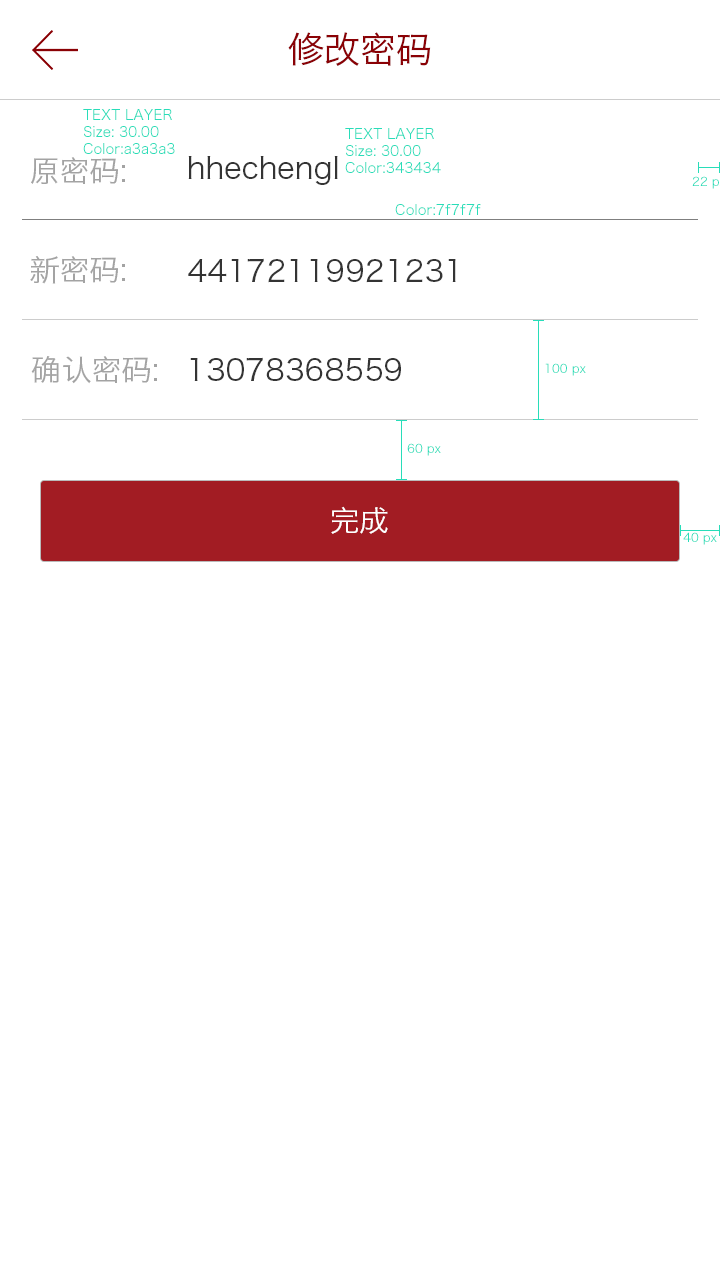
<style>
.page{position:relative;width:720px;height:1280px;background:#ffffff}
.page>*{position:absolute;margin:0}
.t1{font:36px "HiraginoSansGB-W3";color:#8a0105}
.t2{font:14px "HiraginoSansGB-W3";color:#28ddb9}
.t3{font:30px "HiraginoSansGB-W3";color:#a3a3a3}
.t4{font:30px "HiraginoSansGB-W3";color:#343434}
.t5{font:12px "HiraginoSansGB-W3";color:#28ddb9}
.t6{font:30px "HiraginoSansGB-W3";color:#ffffff}
</style>
<div class="page">
<p class="t1" style="left:288px;top:32px;width:143px;height:34px">修改密码</p>
<p class="t2" style="left:83px;top:109px;width:92px;height:45px">TEXT LAYER<br>Size: 30.00<br>Color:a3a3a3</p>
<p class="t2" style="left:345px;top:128px;width:96px;height:45px">TEXT LAYER<br>Size: 30.00<br>Color:343434</p>
<p class="t3" style="left:31px;top:157px;width:94px;height:27px">原密码:</p>
<p class="t4" style="left:188px;top:156px;width:150px;height:29px">hhechengl</p>
<p class="t2" style="left:395px;top:204px;width:86px;height:11px">Color:7f7f7f</p>
<p class="t3" style="left:30px;top:256px;width:95px;height:28px">新密码:</p>
<p class="t4" style="left:188px;top:258px;width:268px;height:25px">44172119921231</p>
<p class="t3" style="left:31px;top:356px;width:126px;height:28px">确认密码:</p>
<p class="t4" style="left:190px;top:357px;width:211px;height:24px">13078368559</p>
<p class="t5" style="left:545px;top:363px;width:41px;height:13px">100 px</p>
<p class="t5" style="left:407px;top:443px;width:34px;height:13px">60 px</p>
<p class="t6" style="left:331px;top:506px;width:57px;height:28px">完成</p>
<p class="t5" style="left:683px;top:532px;width:34px;height:13px">40 px</p>
</div>
